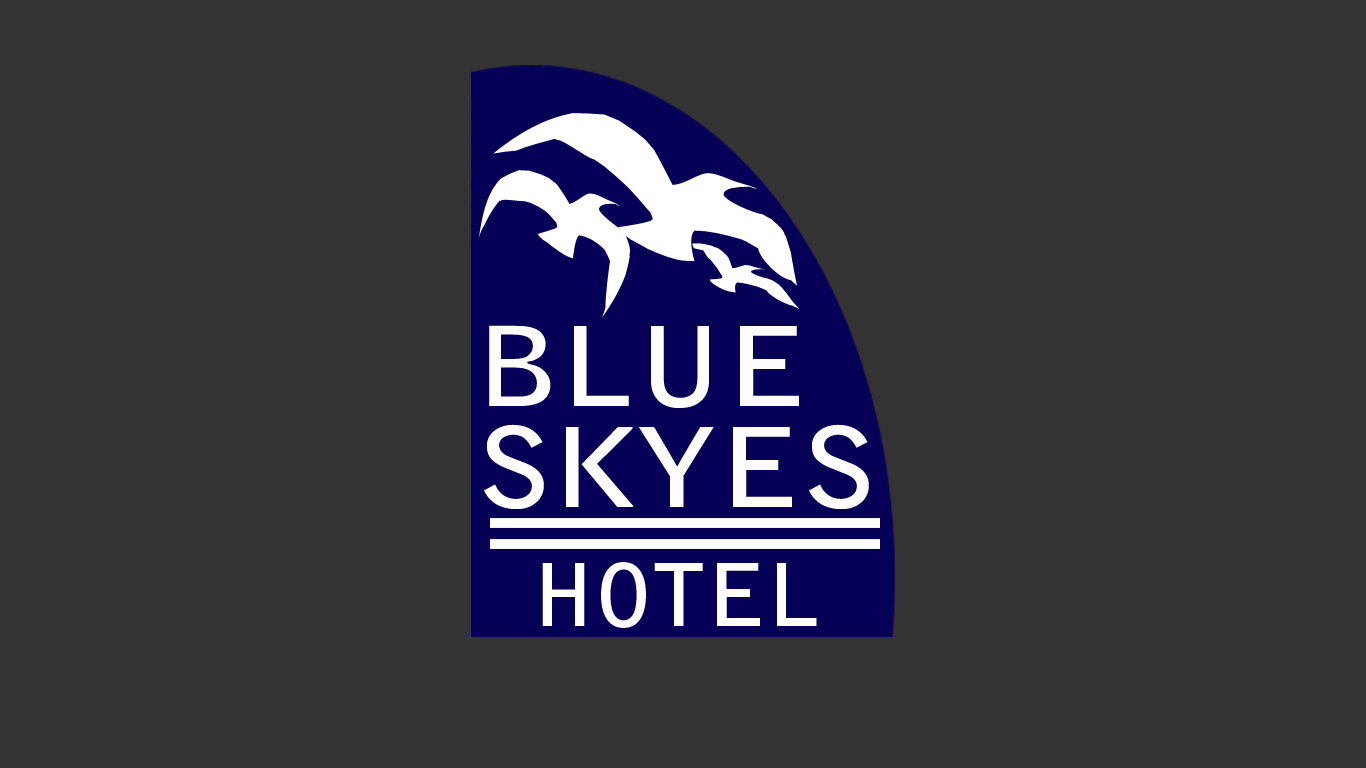
<style>
.page{position:relative;width:1366px;height:768px;background:#333333}
.page>*{position:absolute;margin:0}
.t1{font:108.6px/100.6px "BellGothicStd-Bold";color:#fefefe;scale:1.14 1}
.t2{font:86.3px "BellGothicStd-Bold";color:#ffffff;scale:1.05 1}
</style>
<div class="page">
<p class="t1" style="left:484px;top:325px;width:385px;height:184px">BLUE<br>SKYES</p>
<p class="t2" style="left:542px;top:562px;width:275px;height:66px">HOTEL</p>
</div>
